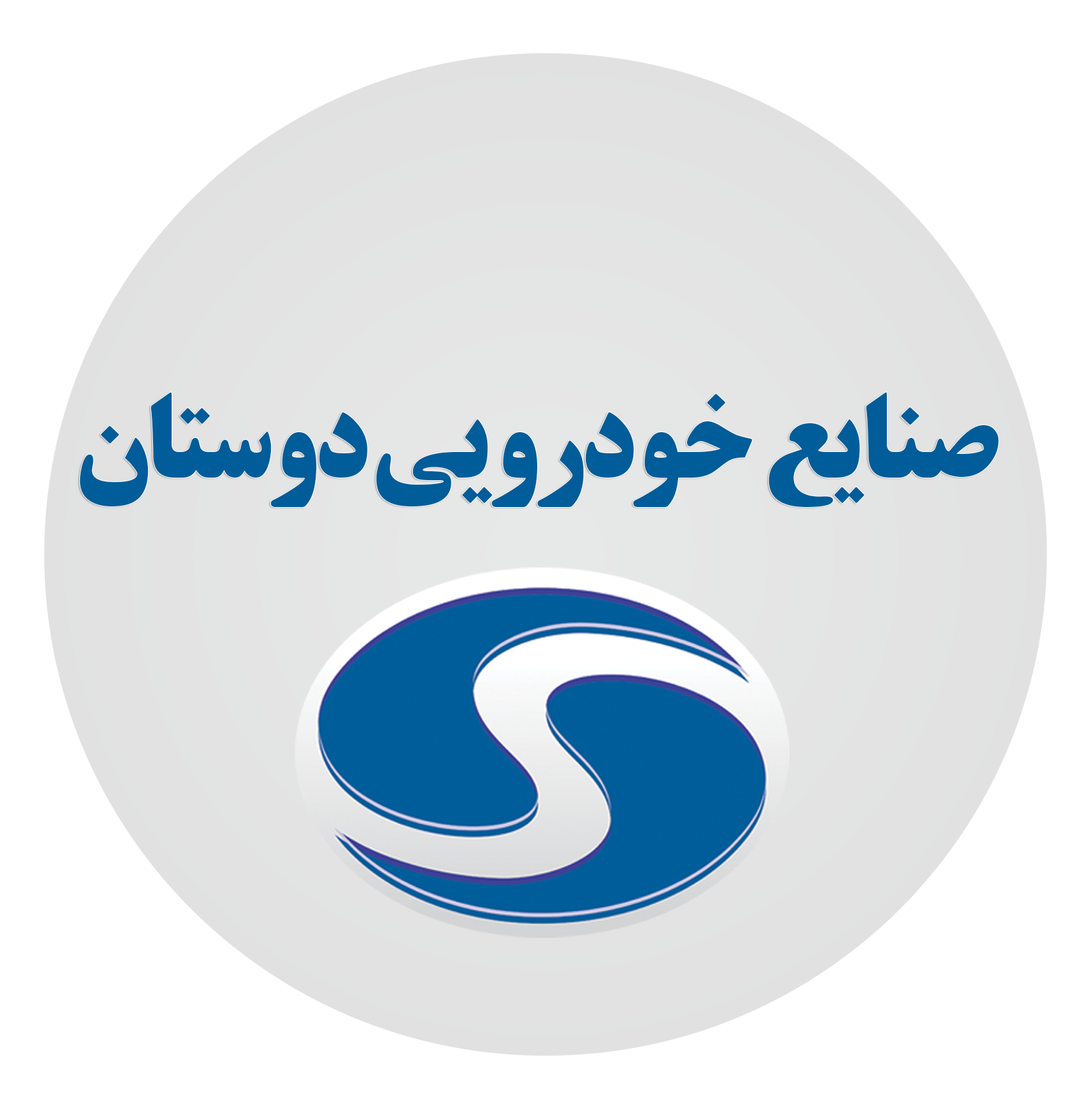
<style>
.page{position:relative;width:1086px;height:1098px;background:#ffffff}
.page>*{position:absolute;margin:0}
.t1{font:116.2px "BTitrBold";letter-spacing:-0.04em;color:#005d99}
</style>
<div class="page">
<p class="t1" style="left:79px;top:392px;width:920px;height:115px">صنایع  خودرویی دوستان</p>
</div>
